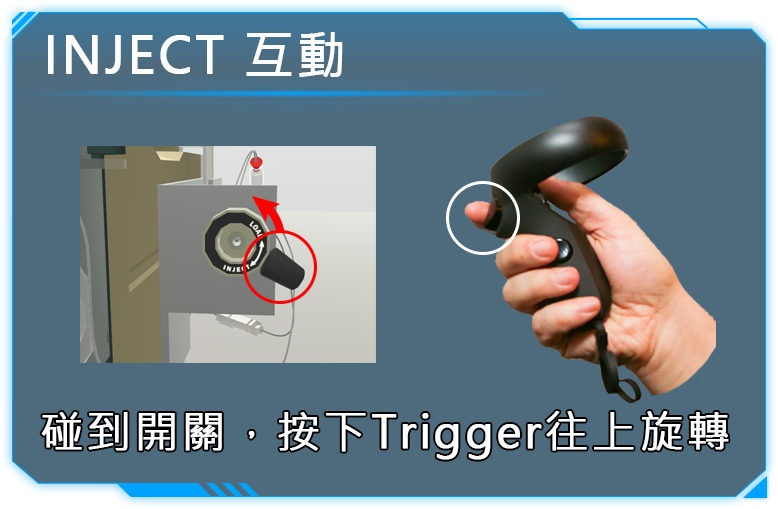
<style>
.page{position:relative;width:778px;height:509px;background:#4e6b7e}
.page>*{position:absolute;margin:0}
.t1{font:49.5px "MicrosoftJhengHeiRegular";letter-spacing:0.05em;color:#fefefe;font-weight:bold}
.t2{font:44px "MicrosoftJhengHeiRegular";letter-spacing:0.05em;color:#fefefe;font-weight:bold}
</style>
<div class="page">
<p class="t1" style="left:48px;top:32px;width:295px;height:45px">INJECT 互動</p>
<p class="t2" style="left:41px;top:411px;width:688px;height:49px">碰到開關，按下Trigger往上旋轉</p>
</div>
